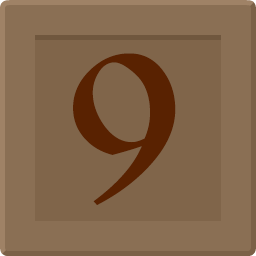
<style>
.page{position:relative;width:256px;height:256px;background:#8a6f54}
.page>*{position:absolute;margin:0}
.t1{font:250px "Livingstone";color:#592201}
</style>
<div class="page">
<p class="t1" style="left:73px;top:53px;width:103px;height:152px">9</p>
</div>
